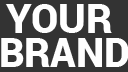
<style>
.page{position:relative;width:128px;height:72px;background:#333333}
.page>*{position:absolute;margin:0}
.t1{font:39.6px/34px "Roboto-Black";color:#fefefe}
</style>
<div class="page">
<p class="t1" style="left:1px;top:4px;width:128px;height:63px;text-align:center">YOUR <br>BRAND</p>
</div>
